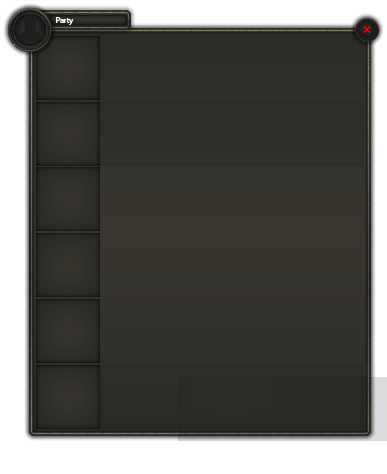
<style>
.page{position:relative;width:387px;height:474px}
.page>*{position:absolute;margin:0}
.t1{font:8px "MyriadPro-Regular";color:#fefefe}
</style>
<div class="page">
<p class="t1" style="left:56px;top:17px;width:18px;height:8px">Party</p>
</div>
